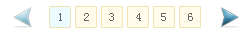
<style>
.page{position:relative;width:250px;height:35px;background:#ffffff}
.page>*{position:absolute;margin:0}
.t1{font:12px "SimSun";letter-spacing:0.02em;color:#666666}
</style>
<div class="page">
<p class="t1" style="left:59px;top:13px;width:3px;height:8px">1</p>
<p class="t1" style="left:84px;top:13px;width:5px;height:8px">2</p>
<p class="t1" style="left:109px;top:13px;width:5px;height:8px">3</p>
<p class="t1" style="left:136px;top:13px;width:5px;height:8px">4</p>
<p class="t1" style="left:161px;top:13px;width:5px;height:8px">5</p>
<p class="t1" style="left:188px;top:13px;width:5px;height:8px">6</p>
</div>
